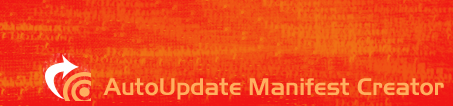
<style>
.page{position:relative;width:453px;height:106px}
.page>*{position:absolute;margin:0}
.t1{font:24px "Slicker";color:#ffae5e}
</style>
<div class="page">
<p class="t1" style="left:103px;top:78px;width:341px;height:22px">AutoUpdate Manifest Creator</p>
</div>
